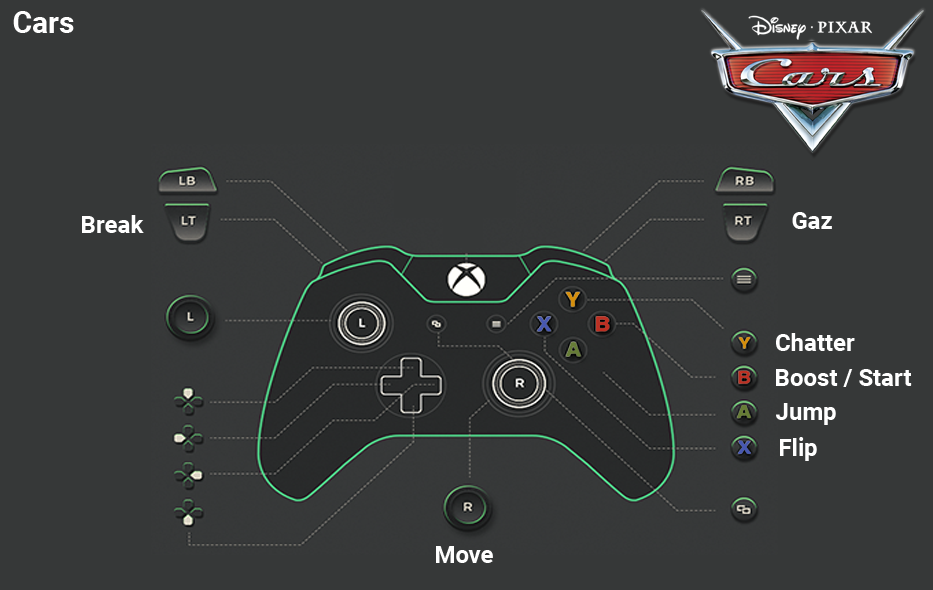
<style>
.page{position:relative;width:933px;height:590px;background:#363838}
.page>*{position:absolute;margin:0}
.t1{font:30px "Roboto-Bold";color:#ffffff}
.t2{font:24px "Roboto-Bold";color:#ffffff}
</style>
<div class="page">
<p class="t1" style="left:13px;top:11px;width:61px;height:22px">Cars</p>
<p class="t2" style="left:82px;top:215px;width:62px;height:18px">Break</p>
<p class="t2" style="left:792px;top:212px;width:40px;height:17px">Gaz</p>
<p class="t2" style="left:776px;top:333px;width:79px;height:18px">Chatter</p>
<p class="t2" style="left:776px;top:369px;width:136px;height:18px">Boost / Start</p>
<p class="t2" style="left:776px;top:403px;width:60px;height:22px">Jump</p>
<p class="t2" style="left:780px;top:437px;width:37px;height:24px">Flip</p>
<p class="t2" style="left:436px;top:546px;width:57px;height:17px">Move</p>
</div>
